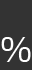
<style>
.page{position:relative;width:32px;height:70px;background:#333333}
.page>*{position:absolute;margin:0}
.t1{font:36px "Exo2-Regular";color:#ffffff}
</style>
<div class="page">
<p class="t1" style="left:1px;top:37px;width:30px;height:25px">%</p>
</div>
